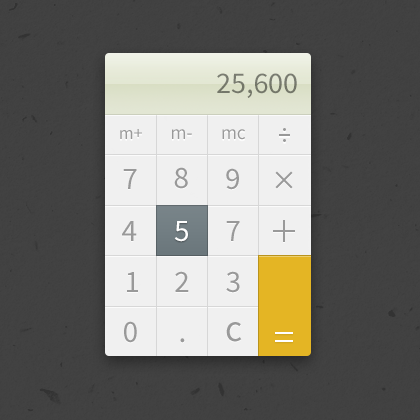
<style>
.page{position:relative;width:420px;height:420px;background:#414141}
.page>*{position:absolute;margin:0}
.t1{font:30px "SourceSansPro-Regular";color:#74776a}
.t2{font:18px "SourceSansPro-Regular";color:#999999}
.t3{font:19.5px "SourceSansPro-Regular";color:#999999}
.t4{font:31.2px "SourceSansPro-Regular";color:#999999}
.t5{font:31.2px "SourceSansPro-Regular";color:#ffffff}
.t6{font:38px "SourceSansPro-Regular";color:#999999}
</style>
<div class="page">
<p class="t1" style="left:217px;top:73px;width:80px;height:25px">25,600</p>
<p class="t2" style="left:120px;top:129px;width:22px;height:10px">m+</p>
<p class="t3" style="left:172px;top:129px;width:20px;height:10px">m-</p>
<p class="t3" style="left:222px;top:129px;width:23px;height:11px">mc</p>
<p class="t4" style="left:123px;top:169px;width:14px;height:20px">7</p>
<p class="t4" style="left:174px;top:167px;width:14px;height:22px">8</p>
<p class="t4" style="left:226px;top:168px;width:13px;height:22px">9</p>
<p class="t4" style="left:122px;top:221px;width:15px;height:20px">4</p>
<p class="t5" style="left:174px;top:221px;width:14px;height:21px">5</p>
<p class="t5" style="left:174px;top:221px;width:14px;height:21px">5</p>
<p class="t4" style="left:226px;top:221px;width:14px;height:20px">7</p>
<p class="t4" style="left:127px;top:272px;width:11px;height:20px">1</p>
<p class="t4" style="left:175px;top:271px;width:14px;height:21px">2</p>
<p class="t4" style="left:226px;top:271px;width:14px;height:22px">3</p>
<p class="t4" style="left:124px;top:321px;width:13px;height:22px">0</p>
<p class="t6" style="left:226px;top:322px;width:16px;height:20px">c</p>
<p class="t4" style="left:180px;top:338px;width:5px;height:5px">.</p>
</div>
